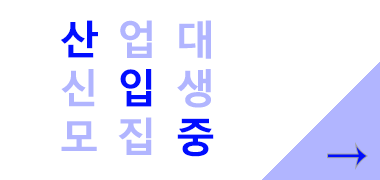
<style>
.page{position:relative;width:380px;height:180px;background:#ffffff}
.page>*{position:absolute;margin:0}
.t1{font:40.6px "MalgunGothicBold";color:#b1b5ff}
.t2{font:40.6px "MalgunGothicBold";color:#010eff}
.t3{font:40.5px "MalgunGothicBold";color:#b1b5ff}
.t4{font:40.5px "MalgunGothicBold";color:#010eff}
</style>
<div class="page">
<p class="t1" style="left:61px;top:20px;width:37px;height:131px;text-align:center"><span class="t2">산<br></span>신<br>모</p>
<p class="t3" style="left:118px;top:20px;width:34px;height:135px;text-align:center">업<br><span class="t4">입<br></span>집</p>
<p class="t1" style="left:177px;top:20px;width:37px;height:137px;text-align:center">대<br>생<br><span class="t2">중</span></p>
</div>
